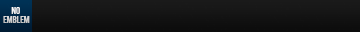
<style>
.page{position:relative;width:360px;height:32px}
.page>*{position:absolute;margin:0}
.t1{font:7.6px "Bebas";color:#cdcdcd}
</style>
<div class="page">
<p class="t1" style="left:3px;top:7px;width:27px;height:16px">NO<br>EMBLEM</p>
</div>
